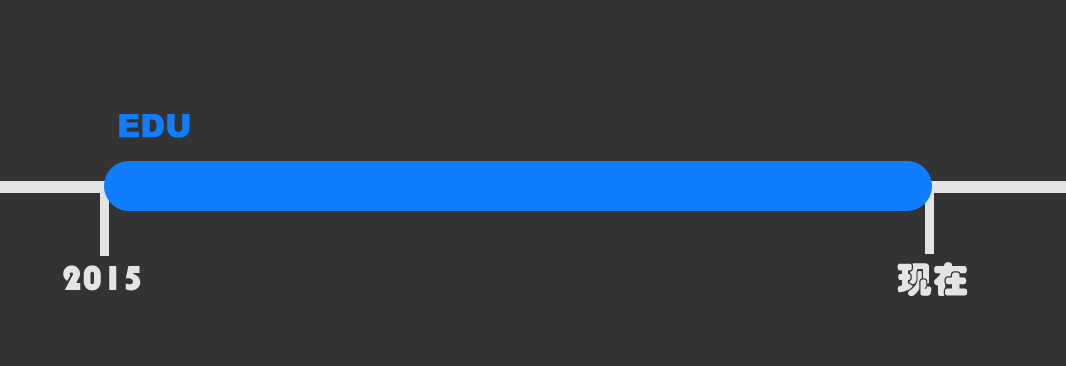
<style>
.page{position:relative;width:1066px;height:366px;background:#333333}
.page>*{position:absolute;margin:0}
.t1{font:36px "STHupo";color:#e4e4e4}
</style>
<div class="page">
<p class="t1" style="left:63px;top:265px;width:78px;height:26px">2015</p>
<p class="t1" style="left:897px;top:262px;width:71px;height:34px">现在</p>
</div>
